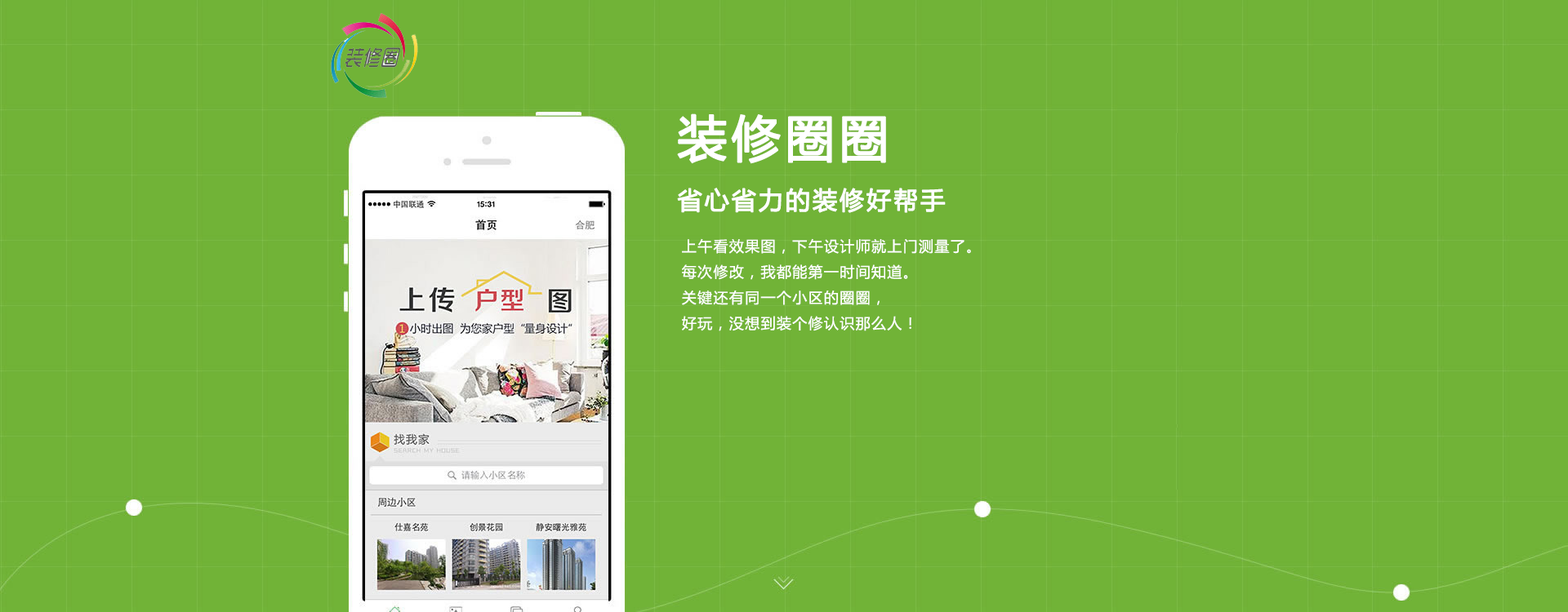
<style>
.page{position:relative;width:1568px;height:612px;background:#71b337}
.page>*{position:absolute;margin:0}
.t1{font:49px "MicrosoftYaHei";letter-spacing:0.075em;color:#ffffff;font-weight:bold}
.t2{font:24.5px "MicrosoftYaHei";letter-spacing:0.075em;color:#ffffff;font-weight:bold}
.t3{font:14.7px "MicrosoftYaHei";letter-spacing:0.075em;color:#ffffff}
</style>
<div class="page">
<p class="t1" style="left:677px;top:114px;width:209px;height:50px">装修圈圈</p>
<p class="t2" style="left:677px;top:188px;width:269px;height:25px">省心省力的装修好帮手</p>
<p class="t3" style="left:682px;top:238px;width:289px;height:94px">上午看效果图，下午设计师就上门测量了。<br>每次修改，我都能第一时间知道。<br>关键还有同一个小区的圈圈，<br>好玩，没想到装个修认识那么人！</p>
</div>
